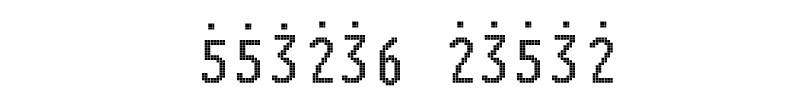
<style>
.page{position:relative;width:800px;height:100px;background:#ffffff}
.page>*{position:absolute;margin:0}
.t1{font:50px "FZXS24--GB1-0";color:#000000}
.t2{font:60.6px "FZXS24--GB1-0";color:#000000;scale:1.16 1}
</style>
<div class="page">
<p class="t1" style="left:208px;top:23px;width:7px;height:7px">.</p>
<p class="t1" style="left:245px;top:23px;width:7px;height:7px">.</p>
<p class="t1" style="left:281px;top:23px;width:7px;height:7px">.</p>
<p class="t1" style="left:319px;top:21px;width:7px;height:7px">.</p>
<p class="t1" style="left:352px;top:21px;width:7px;height:7px">.</p>
<p class="t1" style="left:457px;top:21px;width:7px;height:7px">.</p>
<p class="t1" style="left:491px;top:21px;width:7px;height:7px">.</p>
<p class="t1" style="left:525px;top:21px;width:7px;height:7px">.</p>
<p class="t1" style="left:563px;top:21px;width:7px;height:7px">.</p>
<p class="t1" style="left:600px;top:21px;width:7px;height:7px">.</p>
<p class="t2" style="left:202px;top:35px;width:411px;height:51px">553236 23532</p>
</div>
